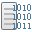
<style>
.page{position:relative;width:32px;height:32px;background:#ffffff}
.page>*{position:absolute;margin:0}
.t1{font:10px/9px "SimSun";color:#547791}
</style>
<div class="page">
<p class="t1" style="left:13px;top:4px;width:18px;height:25px">1010<br>1010<br>1011</p>
</div>
